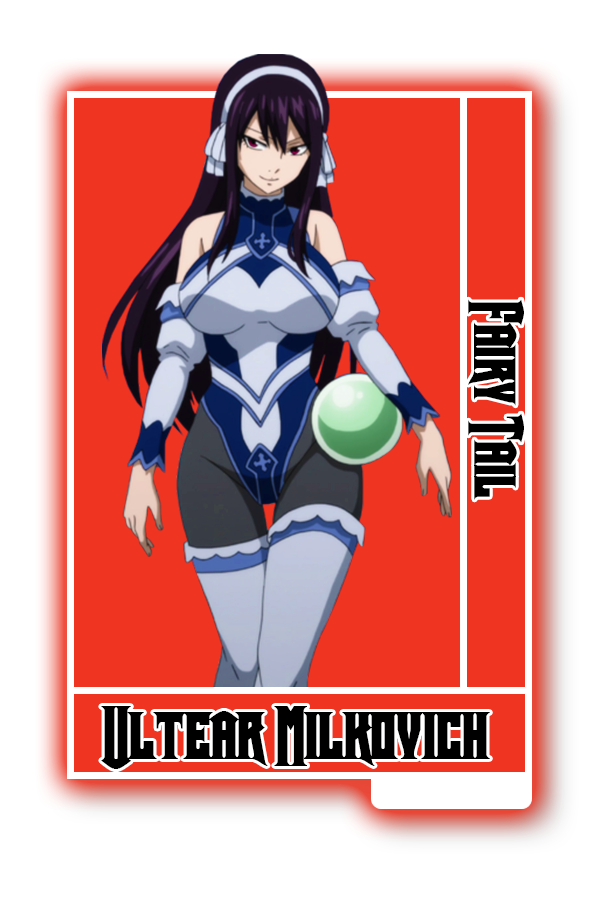
<style>
.page{position:relative;width:600px;height:900px;background:#ffffff}
.page>*{position:absolute;margin:0}
.t1{font:61.5px "Crown-Title";color:#000000}
.t2{font:70.1px "Crown-Title";color:#000000}
</style>
<div class="page">
<p class="t1" style="left:468px;top:299px;width:56px;height:201px;rotate:90deg">Fairy Tail</p>
<p class="t2" style="left:101px;top:706px;width:389px;height:63px">Ultear Milkovich</p>
</div>
